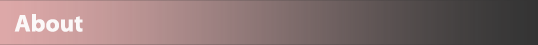
<style>
.page{position:relative;width:538px;height:45px}
.page>*{position:absolute;margin:0}
.t1{font:24px "MyriadWebPro-Bold";color:#fbf8f8}
</style>
<div class="page">
<p class="t1" style="left:14px;top:14px;width:69px;height:18px">About</p>
</div>
